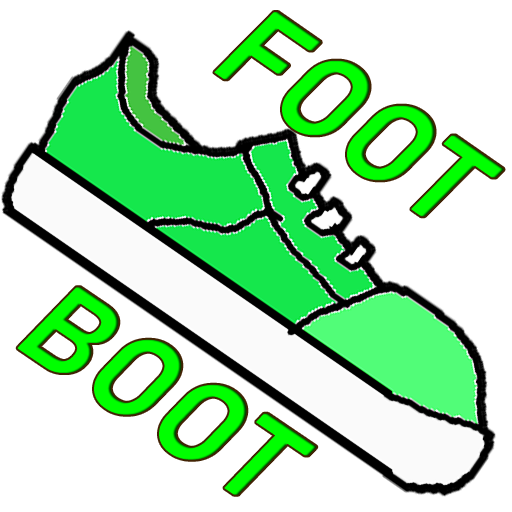
<style>
.page{position:relative;width:512px;height:512px;background:#ffffff}
.page>*{position:absolute;margin:0}
.t1{font:117.3px "Bahnschrift";color:#00ff00;font-weight:bold;font-style:italic}
</style>
<div class="page">
<p class="t1" style="left:214px;top:12px;width:290px;height:205px;rotate:35deg">FOOT</p>
<p class="t1" style="left:17px;top:287px;width:300px;height:208px;rotate:34deg">BOOT</p>
</div>
